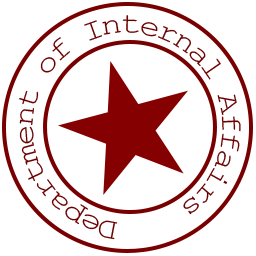
<style>
.page{position:relative;width:256px;height:256px;background:#ffffff}
.page>*{position:absolute;margin:0}
.t1{font:29.7px "CourierNewPSMT";letter-spacing:0.068em;color:#6c0000;scale:1.18 1}
</style>
<div class="page">
<p class="t1" style="left:19px;top:15px;width:222px;height:225px;rotate:90deg">Department of Internal Affairs</p>
</div>
